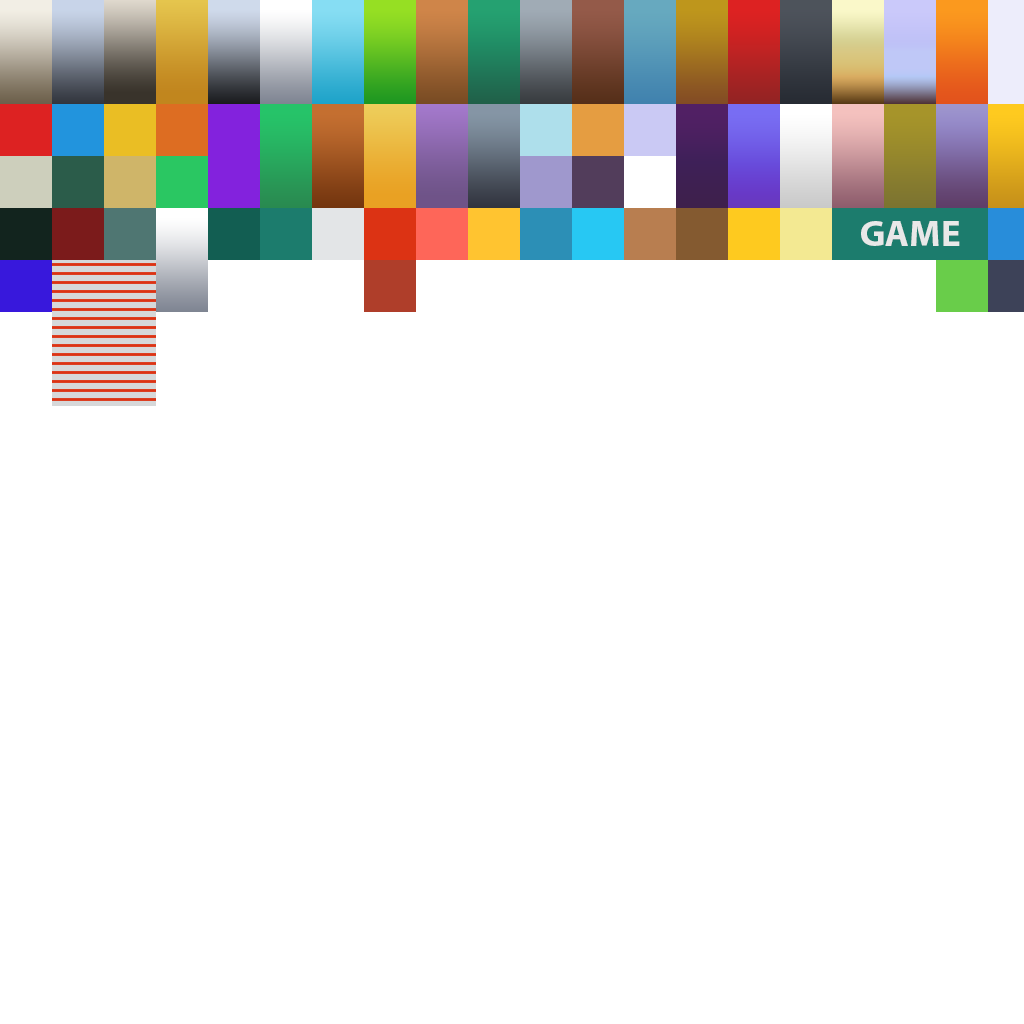
<style>
.page{position:relative;width:1024px;height:1024px;background:#ffffff}
.page>*{position:absolute;margin:0}
.t1{font:37px "MyriadPro-Bold";color:#e8e8e8}
</style>
<div class="page">
<p class="t1" style="left:861px;top:221px;width:99px;height:25px">GAME</p>
</div>
